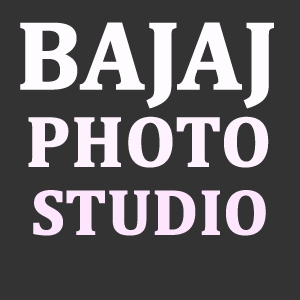
<style>
.page{position:relative;width:300px;height:300px;background:#333333}
.page>*{position:absolute;margin:0}
.t1{font:96.6px "Cambria-Bold";color:#fffcff;font-weight:bold}
.t2{font:71.5px "Cambria-Bold";color:#fdf2fd;font-weight:bold}
.t3{font:63.9px "Cambria-Bold";color:#fde6fd;font-weight:bold}
</style>
<div class="page">
<p class="t1" style="left:20px;top:22px;width:254px;height:87px">BAJAJ</p>
<p class="t2" style="left:28px;top:116px;width:241px;height:52px">PHOTO</p>
<p class="t3" style="left:33px;top:190px;width:233px;height:46px">STUDIO</p>
</div>
